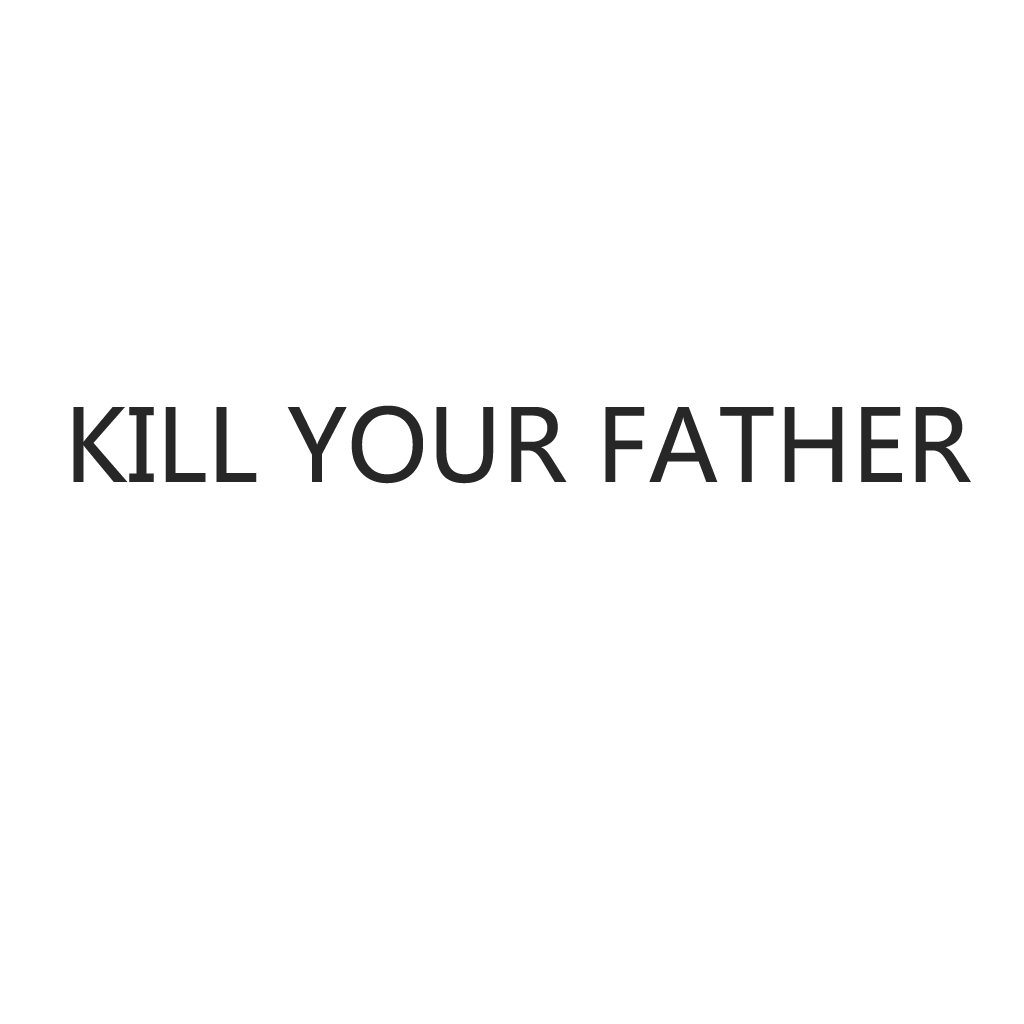
<style>
.page{position:relative;width:1024px;height:1024px;background:#ffffff}
.page>*{position:absolute;margin:0}
.t1{font:98.8px "MicrosoftYaHei-Regular";color:#272727}
</style>
<div class="page">
<p class="t1" style="left:73px;top:405px;width:898px;height:79px">KILL YOUR FATHER</p>
</div>
